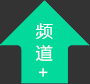
<style>
.page{position:relative;width:90px;height:84px;background:#333333}
.page>*{position:absolute;margin:0}
.t1{font:16.7px "MicrosoftYaHei";color:#ffffff}
</style>
<div class="page">
<p class="t1" style="left:35px;top:23px;width:18px;height:54px">频 道 +</p>
</div>
